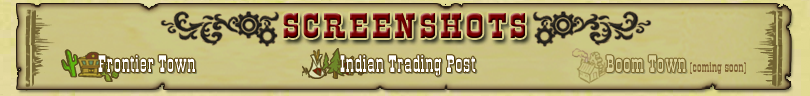
<style>
.page{position:relative;width:810px;height:96px}
.page>*{position:absolute;margin:0}
.t1{font:37.5px "OldTown";letter-spacing:0.05em;scale:1.57 1}
.t2{font:25px "OldTown";letter-spacing:0.01em;color:#ffffff}
.t3{font:25px "OldTown";letter-spacing:0.01em;color:#e2d9a7}
.t4{font:14.6px "OldTown";letter-spacing:0.01em;color:#7c5f32}
</style>
<div class="page">
<p class="t1" style="left:283px;top:13px;width:242px;height:25px">SCREENSHOTS</p>
<p class="t2" style="left:98px;top:55px;width:97px;height:17px">Frontier Town</p>
<p class="t2" style="left:340px;top:55px;width:136px;height:21px">Indian Trading Post</p>
<p class="t3" style="left:606px;top:55px;width:80px;height:17px">Boom Town</p>
<p class="t4" style="left:690px;top:62px;width:56px;height:12px">(coming soon)</p>
</div>
